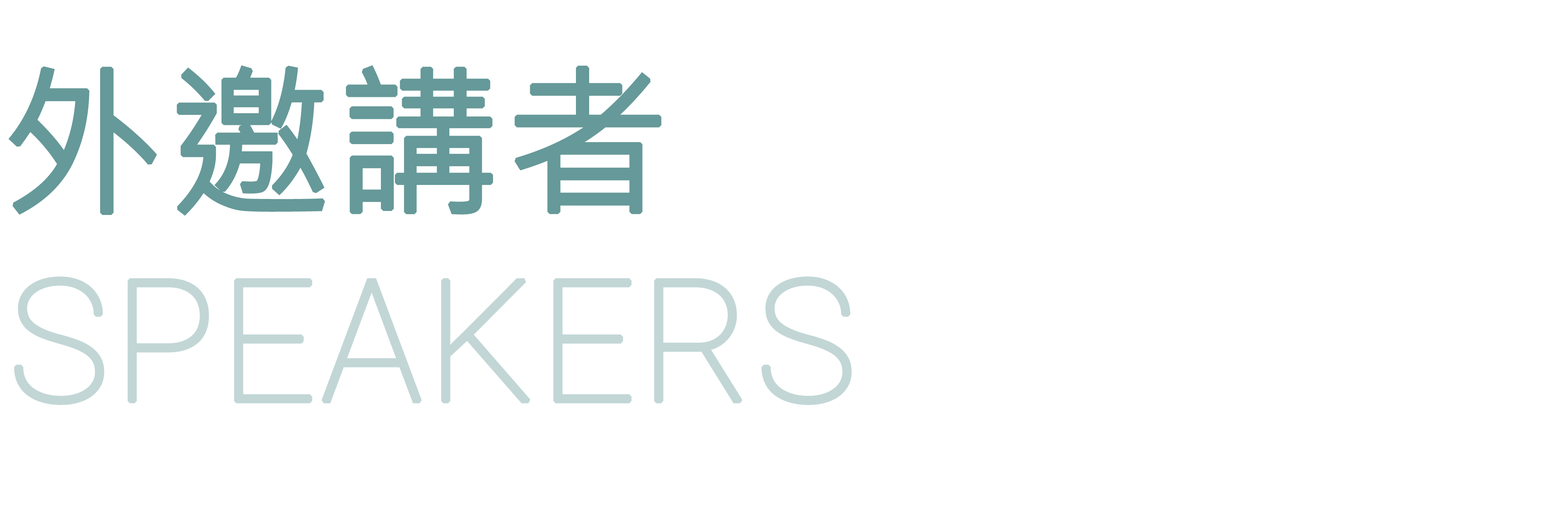
<style>
.page{position:relative;width:1568px;height:508px;background:#ffffff}
.page>*{position:absolute;margin:0}
.t1{font:163.9px "MicrosoftJhengHeiRegular";color:#669999;font-weight:bold}
.t2{font:169.5px "Roboto-Thin";color:#c2d6d6;font-weight:bold}
</style>
<div class="page">
<p class="t1" style="left:8px;top:65px;width:654px;height:151px">外邀講者</p>
<p class="t2" style="left:14px;top:276px;width:838px;height:129px">SPEAKERS</p>
</div>
